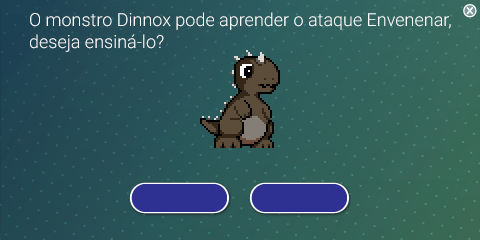
<style>
.page{position:relative;width:480px;height:240px}
.page>*{position:absolute;margin:0}
.t1{font:18px "Roboto-Light";color:#ffffff}
</style>
<div class="page">
<p class="t1" style="left:30px;top:12px;width:421px;height:40px">O monstro Dinnox pode aprender o ataque Envenenar,<br>deseja ensiná-lo?</p>
</div>
